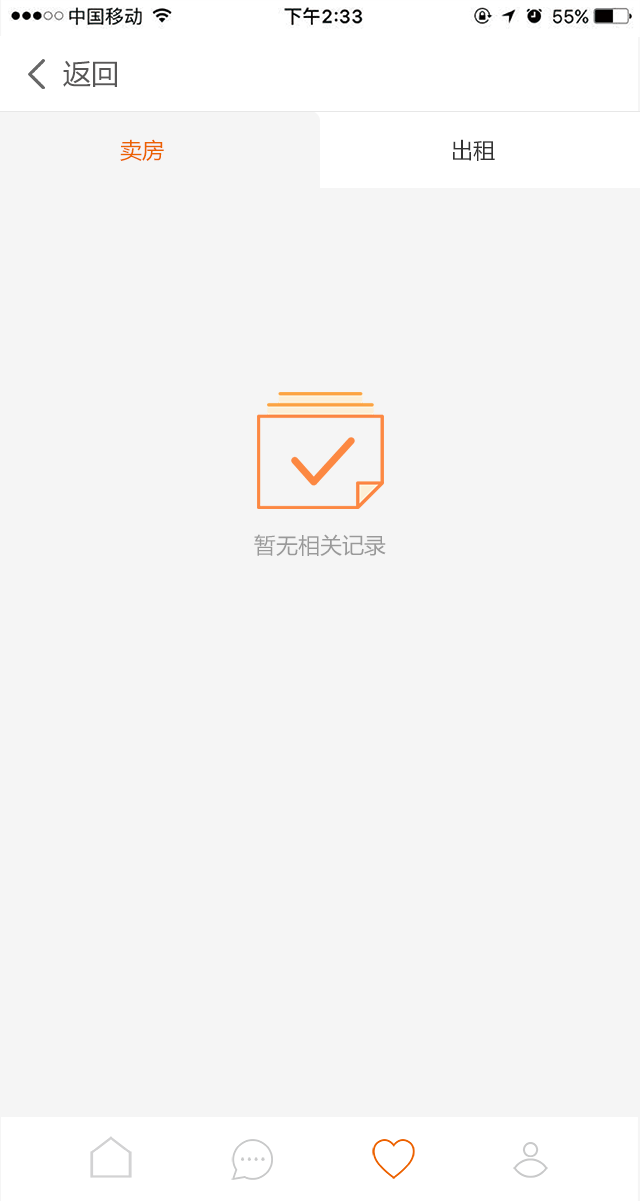
<style>
.page{position:relative;width:640px;height:1201px;background:#f5f5f5}
.page>*{position:absolute;margin:0}
.t1{font:28px "MicrosoftYaHei";color:#585757}
.t2{font:22px "MicrosoftYaHei";color:#eb6100}
.t3{font:22px "MicrosoftYaHei";color:#333333}
.t4{font:22px "MicrosoftYaHei";color:#999999}
</style>
<div class="page">
<p class="t1" style="left:63px;top:60px;width:54px;height:27px">返回</p>
<p class="t2" style="left:120px;top:139px;width:44px;height:22px">卖房</p>
<p class="t3" style="left:453px;top:139px;width:42px;height:22px">出租</p>
<p class="t4" style="left:254px;top:534px;width:132px;height:22px">暂无相关记录</p>
</div>
